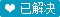
<style>
.page{position:relative;width:60px;height:17px;background:#059abf}
.page>*{position:absolute;margin:0}
.t1{font:12px "SimSun";color:#ffffff}
</style>
<div class="page">
<p class="t1" style="left:21px;top:2px;width:34px;height:12px">已解决</p>
</div>
